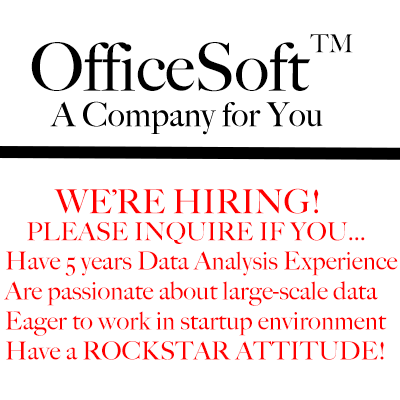
<style>
.page{position:relative;width:400px;height:400px;background:#ffffff}
.page>*{position:absolute;margin:0}
.t1{font:25px "BigCaslon-Medium";color:#000000}
.t2{font:66.7px "BigCaslon-Medium";color:#000000}
.t3{font:33.3px "BigCaslon-Medium";color:#ff0000}
.t4{font:25px "BigCaslon-Medium";color:#ff0000}
</style>
<div class="page">
<p class="t1" style="left:310px;top:34px;width:43px;height:19px">TM</p>
<p class="t2" style="left:31px;top:42px;width:280px;height:50px">OfficeSoft</p>
<p class="t3" style="left:54px;top:188px;width:265px;height:26px">WE’RE HIRING!</p>
<p class="t4" style="left:27px;top:222px;width:338px;height:22px">PLEASE INQUIRE IF YOU...</p>
<p class="t4" style="left:4px;top:251px;width:394px;height:109px">Have 5 years Data Analysis Experience<br>Are passionate about large-scale data<br>Eager to work in startup environment<br>Have a ROCKSTAR ATTITUDE!</p>
</div>
